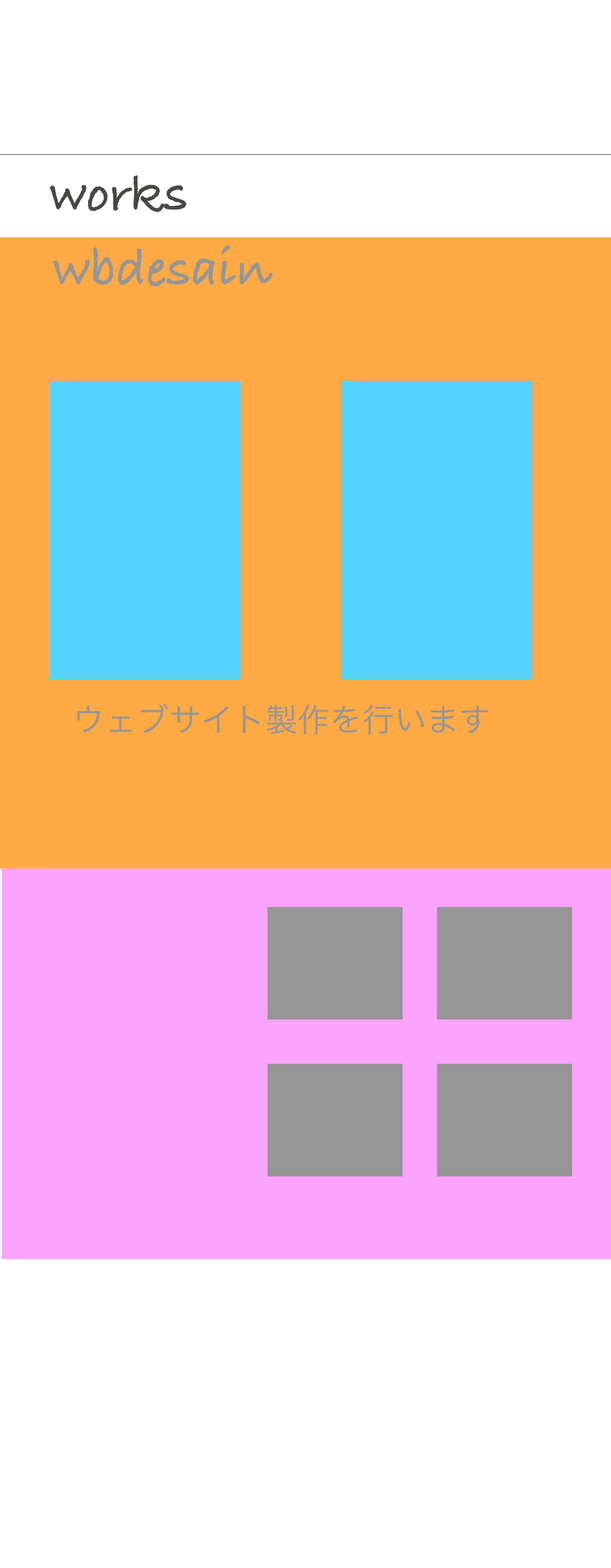
<style>
.page{position:relative;width:611px;height:1568px;background:#ffffff}
.page>*{position:absolute;margin:0}
.t1{font:53.6px "BradleyHandITCTT-Bold";color:#474744}
.t2{font:53.6px "BradleyHandITCTT-Bold";color:#969696}
.t3{font:32.2px "HiraKakuProN-W3";color:#969696}
</style>
<div class="page">
<p class="t1" style="left:50px;top:175px;width:136px;height:37px">works</p>
<p class="t2" style="left:53px;top:244px;width:220px;height:43px">wbdesain</p>
<p class="t3" style="left:77px;top:704px;width:411px;height:30px">ウェブサイト製作を行います</p>
</div>
